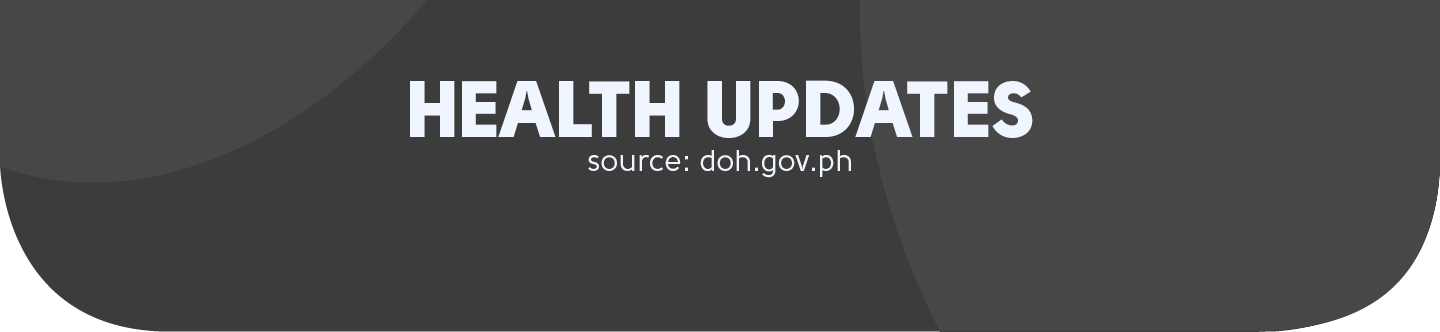
<style>
.page{position:relative;width:1440px;height:332px;background:#474747}
.page>*{position:absolute;margin:0}
.t1{font:80px "Solomon-Sans-Black";color:#f0f6ff}
.t2{font:30px "Solomon-Sans-Normal";color:#f0f6ff}
</style>
<div class="page">
<p class="t1" style="left:410px;top:80px;width:623px;height:58px">HEALTH UPDATES</p>
<p class="t2" style="left:588px;top:150px;width:263px;height:28px">source: doh.gov.ph</p>
</div>
